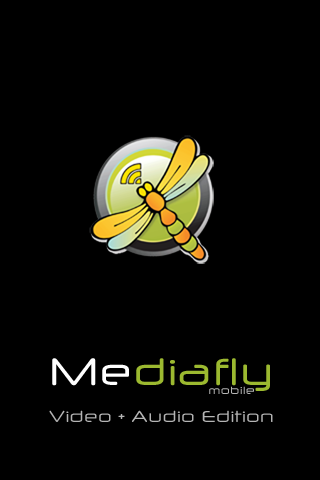
<style>
.page{position:relative;width:320px;height:480px;background:#000000}
.page>*{position:absolute;margin:0}
.t1{font:59.8px "NeuropolX";color:#9cb930}
.t2{font:59.8px "NeuropolX";color:#ffffff}
.t3{font:16.6px "NeuropolX";color:#b4b4b4}
.t4{font:24.9px "NeuropolX";color:#b4b4b4}
</style>
<div class="page">
<p class="t1" style="left:52px;top:358px;width:218px;height:33px"><span class="t2">Me</span>diafly</p>
<p class="t3" style="left:209px;top:386px;width:45px;height:8px">mobile</p>
<p class="t4" style="left:49px;top:410px;width:224px;height:12px">Video + Audio Edition</p>
</div>
